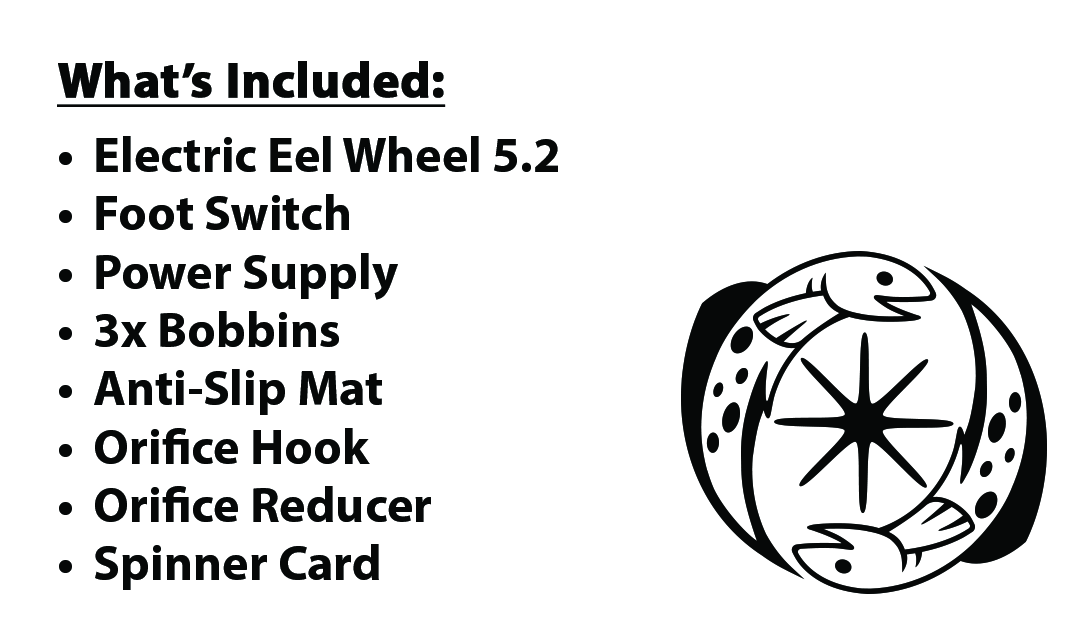
<style>
.page{position:relative;width:1085px;height:635px;background:#ffffff}
.page>*{position:absolute;margin:0}
.t1{font:50px/58.3px "MyriadPro-Bold";color:#060808}
.t2{font:50px/75px "MyriadPro-Bold";color:#060808;font-weight:bold;text-decoration:underline}
.t3{font:50px/75px "MyriadPro-Bold";color:#060808}
</style>
<div class="page">
<p class="t1" style="left:57px;top:61px;width:501px;height:529px"><span class="t2">What’s Included:<br></span><span class="t3">•</span> Electric Eel Wheel 5.2<br>• Foot Switch<br>• Power Supply<br>• 3x Bobbins<br>• Anti-Slip Mat<br>• Orifice Hook<br>• Orifice Reducer<br>• Spinner Card</p>
</div>
